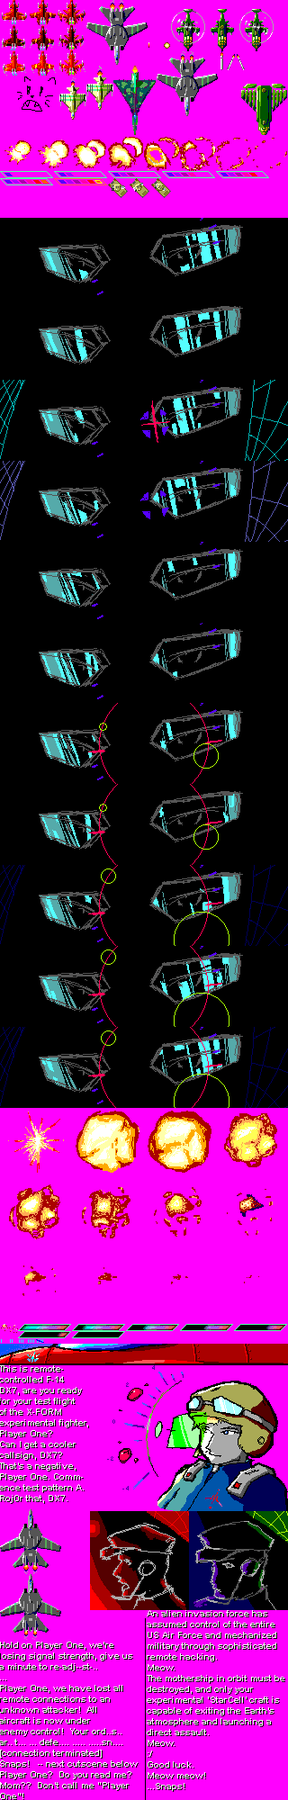
<style>
.page{position:relative;width:288px;height:1800px;background:#000000}
.page>*{position:absolute;margin:0}
.t1{font:9px "Arial-BoldMT";color:#ffffff}
</style>
<div class="page">
<p class="t1" style="left:0px;top:1365px;width:138px;height:434px">This is remote-<br>controlled F-14<br>DX7, are you ready<br>for your test flight<br>of the X-FORM<br>experimental fighter,<br>Player One?<br>Can I get a cooler<br>callsign, DX7?<br>That’s a negative,<br>Player One. Comm-<br>ence test pattern A.<br>Roj0r that, DX7.<br><br><br><br><br><br><br><br><br><br><br><br><br><br>Hold on Player One, we’re<br>losing signal strength, give us<br>a minute to re-adj--st-..<br>...<br>Player One, we have lost all<br>remote connections to an<br>unknown attacker!  All <br>aircraft is now under<br>enemy control!  Your ord..s..<br>ar.. t... ... defe.... ..... .....sn....<br>[connection terminated]<br>Snaps!   -- next cutscene below<br>Player One?  Do you read me?<br>Mom??  Don’t call me “Player<br>One”!</p>
<p class="t1" style="left:147px;top:1610px;width:137px;height:181px">An alien invasion force has<br>assumed control of the entire<br>US Air Force and mechanized<br>military through sophisticated<br>remote hacking.<br>Meow.<br>The mothership in orbit must be<br>destroyed, and only your<br>experimental ‘StarCell’ craft is<br>capable of exiting the Earth’s<br>atmosphere and launching a<br>direct assault.<br>Meow.<br>:/<br>Good luck.<br>Meow meow!<br>...Snaps!</p>
</div>
